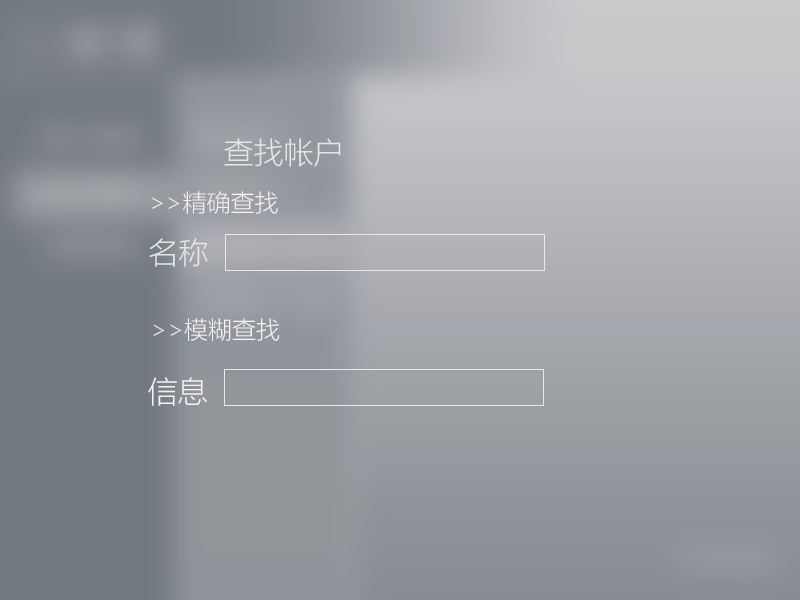
<style>
.page{position:relative;width:800px;height:600px}
.page>*{position:absolute;margin:0}
.t1{font:30px "MicrosoftYaHeiLight";color:#e6e6e6}
.t2{font:24px "MicrosoftYaHeiLight";color:#f7f2f2}
.t3{font:30px "MicrosoftYaHeiLight";color:#f7f2f2}
</style>
<div class="page">
<p class="t1" style="left:224px;top:138px;width:117px;height:29px">查找帐户</p>
<p class="t2" style="left:152px;top:191px;width:126px;height:23px">&gt;&gt;精确查找</p>
<p class="t1" style="left:149px;top:238px;width:59px;height:29px">名称</p>
<p class="t2" style="left:153px;top:318px;width:127px;height:23px">&gt;&gt;模糊查找</p>
<p class="t3" style="left:148px;top:377px;width:59px;height:29px">信息</p>
</div>
